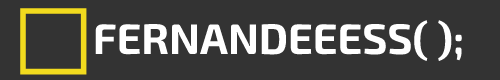
<style>
.page{position:relative;width:500px;height:80px;background:#333333}
.page>*{position:absolute;margin:0}
.t1{font:42.8px "Exo2-Bold";color:#ffffff}
</style>
<div class="page">
<p class="t1" style="left:95px;top:20px;width:367px;height:42px">FERNANDEEESS( );</p>
</div>
